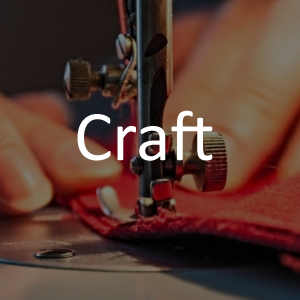
<style>
.page{position:relative;width:300px;height:300px}
.page>*{position:absolute;margin:0}
.t1{font:72px "Calibri";color:#ffffff}
</style>
<div class="page">
<p class="t1" style="left:77px;top:110px;width:136px;height:51px">Craft</p>
</div>
